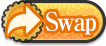
<style>
.page{position:relative;width:106px;height:46px}
.page>*{position:absolute;margin:0}
.t1{font:25px "RyuminPro-ExBold";letter-spacing:-0.08em;color:#ffffff;scale:0.9 1}
</style>
<div class="page">
<p class="t1" style="left:45px;top:11px;width:51px;height:24px">Swap</p>
</div>
